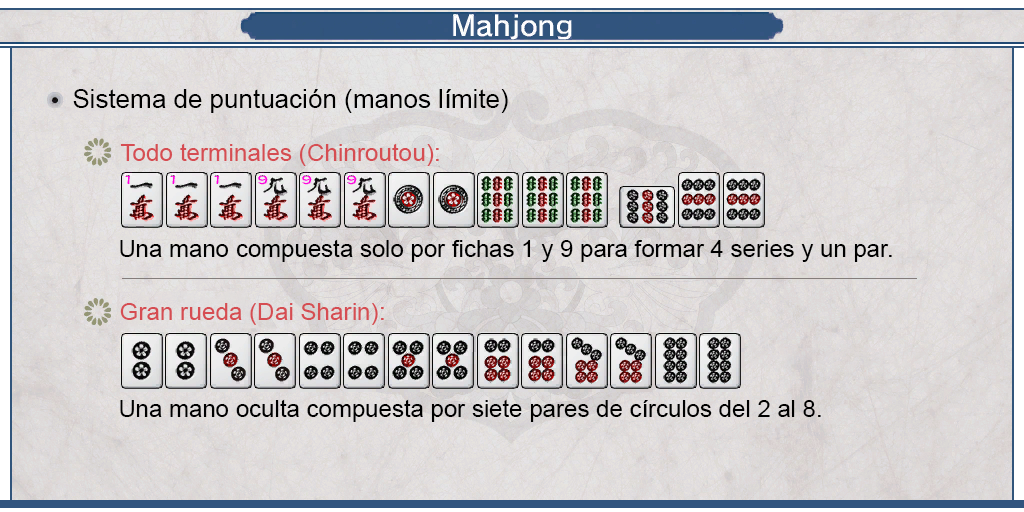
<style>
.page{position:relative;width:1024px;height:512px}
.page>*{position:absolute;margin:0}
.t1{font:26px "ArialMT";color:#000000}
.t2{font:24px "ArialMT";color:#d64d52}
.t3{font:24px "ArialMT";color:#000000}
</style>
<div class="page">
<p class="t1" style="left:73px;top:89px;width:435px;height:24px">Sistema de puntuación (manos límite)</p>
<p class="t2" style="left:120px;top:143px;width:319px;height:23px">Todo terminales (Chinroutou):</p>
<p class="t3" style="left:120px;top:239px;width:772px;height:23px">Una mano compuesta solo por fichas 1 y 9 para formar 4 series y un par.</p>
<p class="t2" style="left:120px;top:303px;width:264px;height:22px">Gran rueda (Dai Sharin):</p>
<p class="t3" style="left:120px;top:399px;width:701px;height:23px">Una mano oculta compuesta por siete pares de círculos del 2 al 8.</p>
</div>
